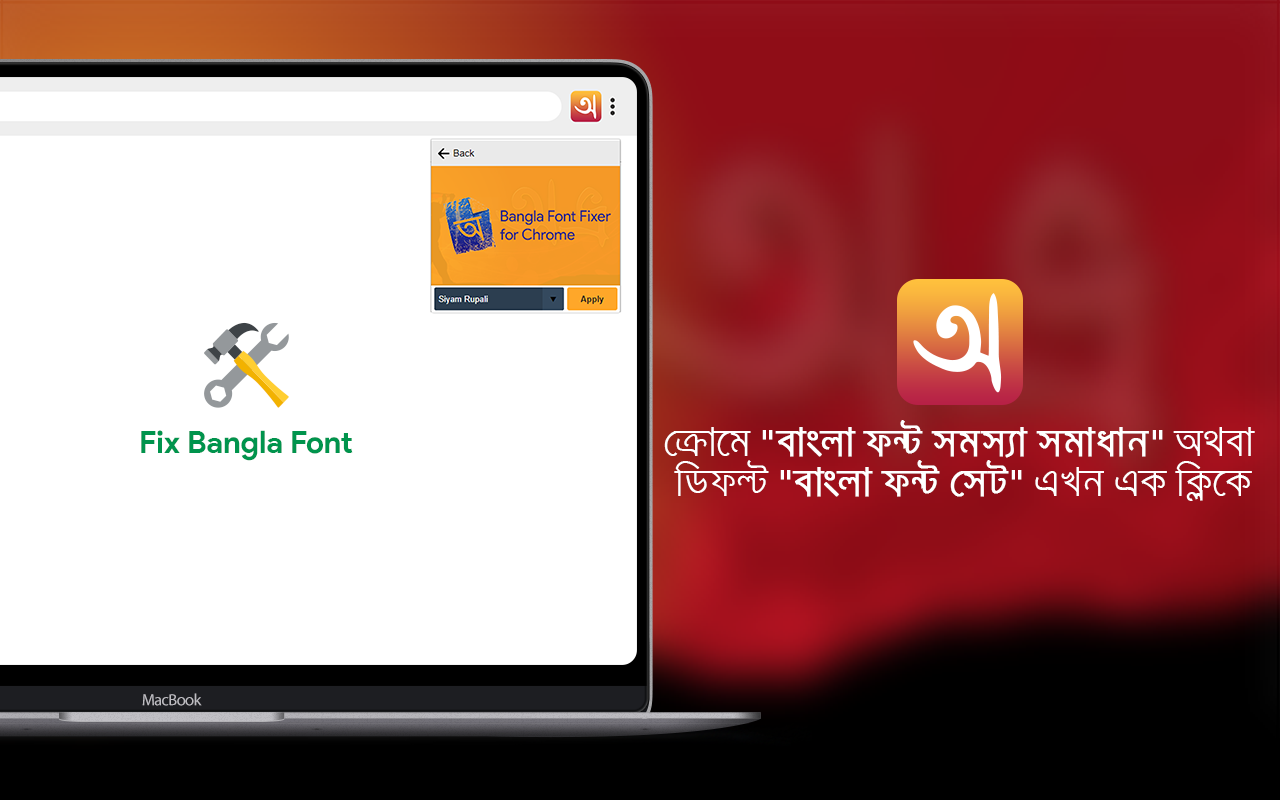
<style>
.page{position:relative;width:1280px;height:800px;background:#ffffff}
.page>*{position:absolute;margin:0}
.t1{font:33.2px "SiyamRupaliANSI";color:#ffffff;font-weight:bold}
.t2{font:33.2px "SiyamRupaliANSI";color:#ffffff}
.t3{font:31px "ProductSans-Bold";color:#00944d}
.t4{font:16.4px "MyriadPro-Regular";letter-spacing:-0.04em;color:#bebdc2}
</style>
<div class="page">
<p class="t1" style="left:664px;top:420px;width:591px;height:81px;text-align:center"><span class="t2">†µv‡g </span>"evsjv d›U mgm¨v mgvavb"<span class="t2"> A_ev <br>wWdë </span>"evsjv d›U †mU"<span class="t2"> GLb GK wK¬‡K</span></p>
<p class="t3" style="left:141px;top:430px;width:212px;height:31px">Fix Bangla Font</p>
<p class="t4" style="left:142px;top:693px;width:60px;height:13px">MacBook</p>
</div>
